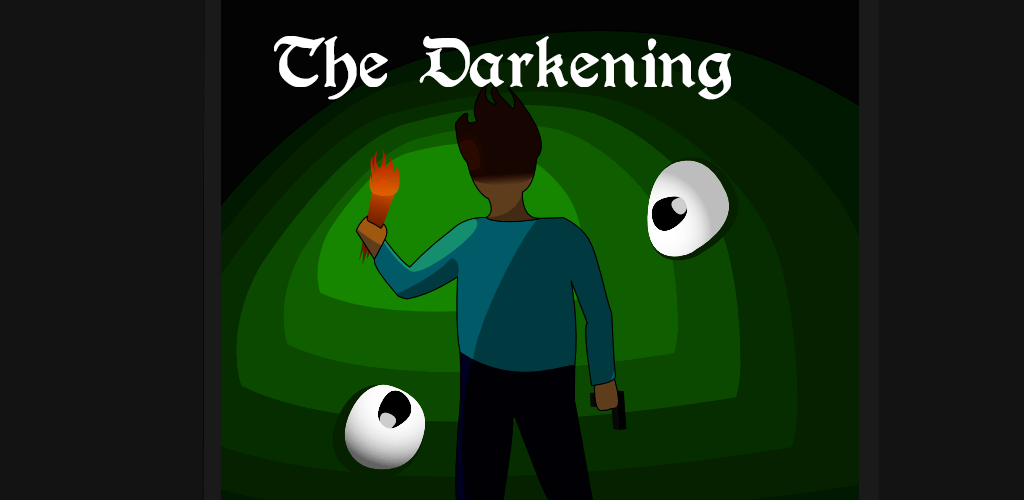
<style>
.page{position:relative;width:1024px;height:500px;background:#131313}
.page>*{position:absolute;margin:0}
.t1{font:79.2px "Augusta-Regular";color:#ffffff}
</style>
<div class="page">
<p class="t1" style="left:274px;top:36px;width:457px;height:64px">The Darkening</p>
</div>
